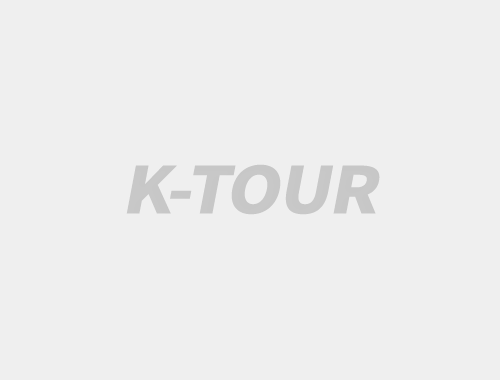
<style>
.page{position:relative;width:500px;height:380px;background:#efefef}
.page>*{position:absolute;margin:0}
.t1{font:63.9px "NotoSansCJKkr-Black";letter-spacing:-0.025em;color:#c7c7c7;font-style:italic;scale:1.08 1}
</style>
<div class="page">
<p class="t1" style="left:126px;top:164px;width:254px;height:51px">K-TOUR</p>
</div>
